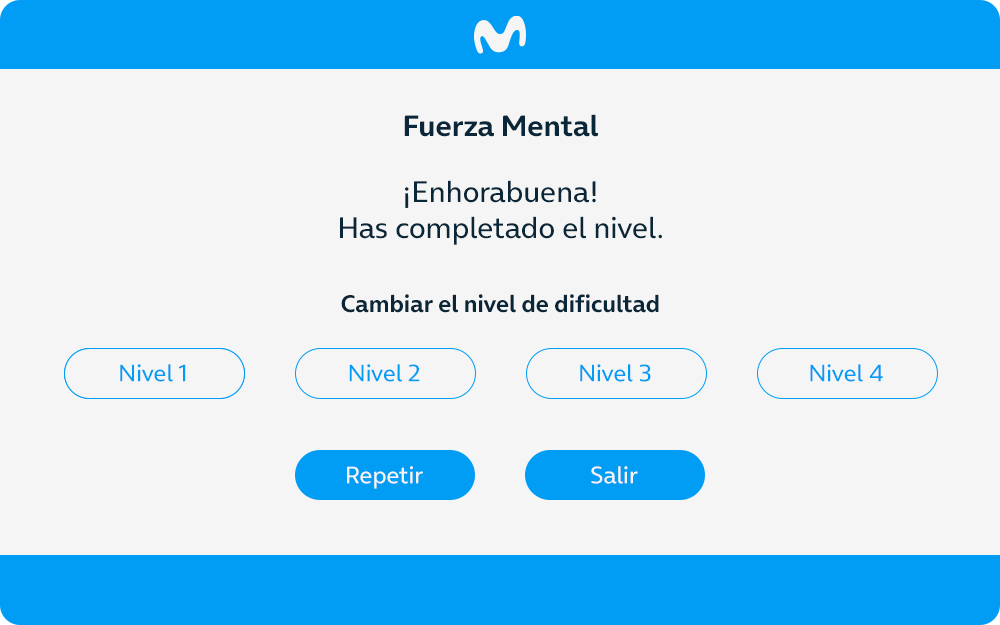
<style>
.page{position:relative;width:1000px;height:625px;background:#f5f5f5}
.page>*{position:absolute;margin:0}
.t1{font:30px "OnAir-Bold";color:#0a2739}
.t2{font:30px "OnAir-Regular";color:#0a2739}
.t3{font:24px "OnAir-Bold";color:#0a2739}
.t4{font:24px "OnAir-Regular";color:#019df4}
.t5{font:24px "OnAir-Regular";color:#f5f5f5}
</style>
<div class="page">
<p class="t1" style="left:404px;top:114px;width:194px;height:23px">Fuerza Mental</p>
<p class="t2" style="left:340px;top:180px;width:322px;height:65px;text-align:center">¡Enhorabuena!<br>Has completado el nivel.</p>
<p class="t3" style="left:341px;top:294px;width:318px;height:19px">Cambiar el nivel de dificultad</p>
<p class="t4" style="left:120px;top:364px;width:66px;height:18px">Nivel 1</p>
<p class="t4" style="left:120px;top:364px;width:66px;height:18px">Nivel 1</p>
<p class="t4" style="left:349px;top:364px;width:71px;height:18px">Nivel 2</p>
<p class="t4" style="left:580px;top:364px;width:71px;height:18px">Nivel 3</p>
<p class="t4" style="left:810px;top:364px;width:73px;height:18px">Nivel 4</p>
<p class="t5" style="left:347px;top:466px;width:76px;height:23px">Repetir</p>
<p class="t5" style="left:591px;top:466px;width:47px;height:18px">Salir</p>
</div>
